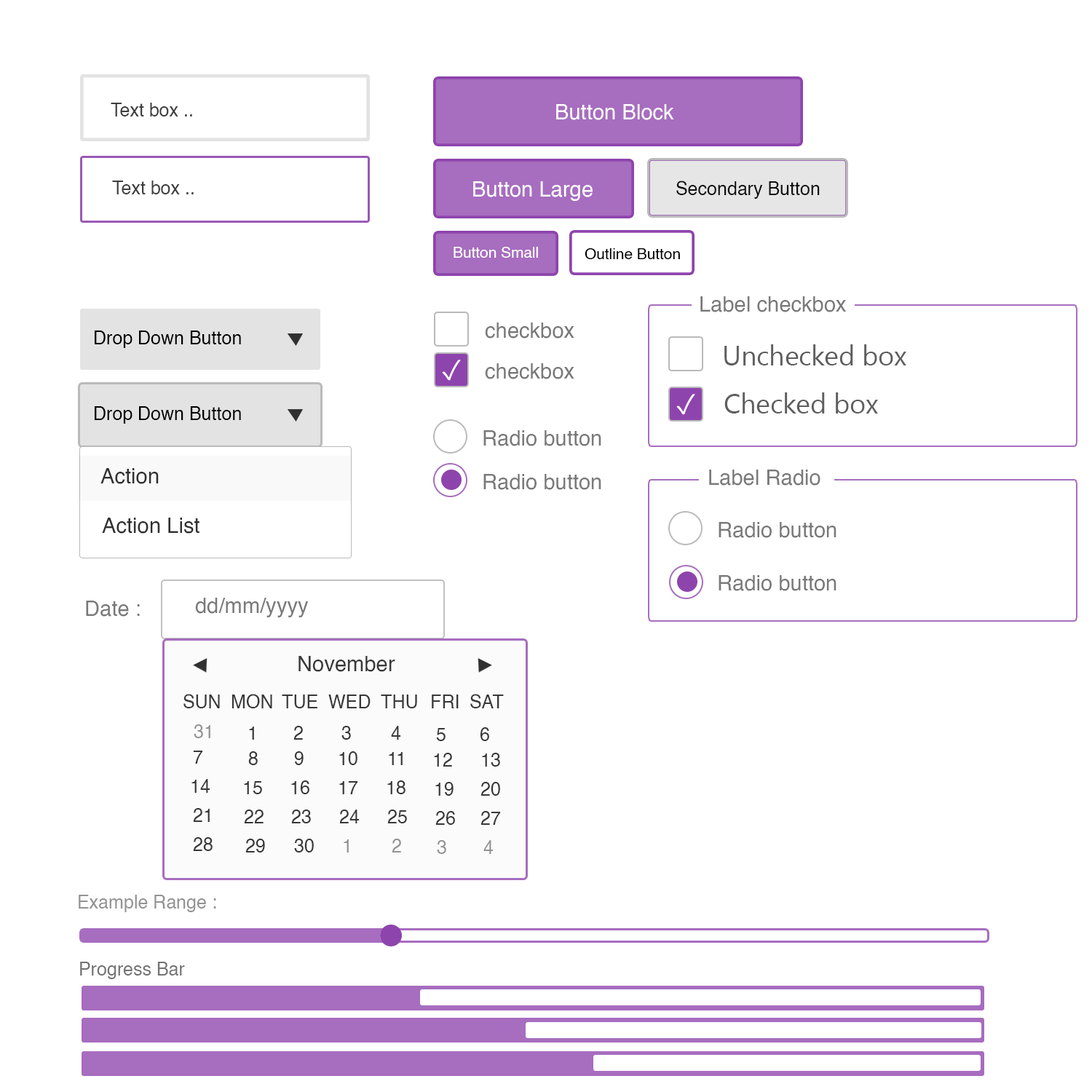
<style>
.page{position:relative;width:1092px;height:1092px;background:#ffffff}
.page>*{position:absolute;margin:0}
.t1{font:18.2px "Helvetica";color:#3f3f3f}
.t2{font:21.2px "Helvetica";color:#ffffff}
.t3{font:18.2px "Helvetica";color:#0f0f0f}
.t4{font:15.2px "Helvetica";color:#ffffff}
.t5{font:15.2px "Helvetica";color:#000000}
.t6{font:21.2px "Helvetica";color:#797979}
.t7{font:18.2px "Helvetica";color:#000000}
.t8{font:21.2px "Helvetica";color:#303030}
.t9{font:21.2px "Helvetica";color:#383838}
.t10{font:18.2px "Helvetica";color:#383838}
.t11{font:18.2px "Helvetica";color:#939393}
.t12{font:18.2px "Helvetica";color:#737373}
</style>
<div class="page">
<p class="t1" style="left:111px;top:103px;width:81px;height:13px">Text box ..</p>
<p class="t2" style="left:556px;top:104px;width:118px;height:16px">Button Block</p>
<p class="t1" style="left:112px;top:181px;width:82px;height:13px">Text box ..</p>
<p class="t2" style="left:473px;top:181px;width:120px;height:20px">Button Large</p>
<p class="t3" style="left:676px;top:181px;width:144px;height:18px">Secondary Button</p>
<p class="t4" style="left:454px;top:247px;width:84px;height:11px">Button Small</p>
<p class="t5" style="left:585px;top:248px;width:95px;height:11px">Outline Button</p>
<p class="t6" style="left:700px;top:296px;width:147px;height:16px">Label checkbox</p>
<p class="t6" style="left:485px;top:322px;width:89px;height:17px">checkbox</p>
<p class="t7" style="left:95px;top:331px;width:146px;height:17px">Drop Down Button</p>
<p class="t6" style="left:485px;top:363px;width:89px;height:16px">checkbox</p>
<p class="t7" style="left:95px;top:406px;width:146px;height:18px">Drop Down Button</p>
<p class="t6" style="left:483px;top:430px;width:118px;height:16px">Radio button</p>
<p class="t8" style="left:100px;top:468px;width:59px;height:16px">Action</p>
<p class="t6" style="left:483px;top:474px;width:118px;height:16px">Radio button</p>
<p class="t6" style="left:709px;top:470px;width:111px;height:16px">Label Radio</p>
<p class="t8" style="left:102px;top:518px;width:97px;height:16px">Action List</p>
<p class="t6" style="left:719px;top:522px;width:117px;height:16px">Radio button</p>
<p class="t6" style="left:719px;top:575px;width:117px;height:16px">Radio button</p>
<p class="t6" style="left:86px;top:601px;width:54px;height:16px">Date :</p>
<p class="t6" style="left:195px;top:598px;width:114px;height:19px">dd/mm/yyyy</p>
<p class="t9" style="left:298px;top:656px;width:97px;height:16px">November</p>
<p class="t10" style="left:183px;top:694px;width:37px;height:14px">SUN</p>
<p class="t10" style="left:232px;top:694px;width:40px;height:14px">MON</p>
<p class="t10" style="left:282px;top:695px;width:35px;height:13px">TUE</p>
<p class="t10" style="left:328px;top:695px;width:43px;height:13px">WED</p>
<p class="t10" style="left:381px;top:695px;width:36px;height:13px">THU</p>
<p class="t10" style="left:432px;top:695px;width:27px;height:13px">FRI</p>
<p class="t10" style="left:470px;top:694px;width:34px;height:14px">SAT</p>
<p class="t11" style="left:194px;top:724px;width:16px;height:14px">31</p>
<p class="t10" style="left:293px;top:726px;width:10px;height:14px">2</p>
<p class="t10" style="left:341px;top:726px;width:10px;height:14px">3</p>
<p class="t10" style="left:391px;top:726px;width:10px;height:14px">4</p>
<p class="t10" style="left:249px;top:727px;width:5px;height:13px">1</p>
<p class="t10" style="left:436px;top:728px;width:10px;height:13px">5</p>
<p class="t10" style="left:480px;top:727px;width:9px;height:14px">6</p>
<p class="t10" style="left:193px;top:751px;width:10px;height:13px">7</p>
<p class="t10" style="left:248px;top:751px;width:10px;height:14px">8</p>
<p class="t10" style="left:294px;top:751px;width:10px;height:14px">9</p>
<p class="t10" style="left:339px;top:751px;width:18px;height:14px">10</p>
<p class="t10" style="left:389px;top:752px;width:14px;height:13px">11</p>
<p class="t10" style="left:434px;top:753px;width:18px;height:14px">12</p>
<p class="t10" style="left:482px;top:753px;width:18px;height:14px">13</p>
<p class="t10" style="left:191px;top:779px;width:19px;height:14px">14</p>
<p class="t10" style="left:244px;top:781px;width:18px;height:13px">15</p>
<p class="t10" style="left:291px;top:780px;width:18px;height:14px">16</p>
<p class="t10" style="left:339px;top:781px;width:19px;height:13px">17</p>
<p class="t10" style="left:387px;top:780px;width:18px;height:14px">18</p>
<p class="t10" style="left:435px;top:782px;width:19px;height:14px">19</p>
<p class="t10" style="left:480px;top:782px;width:20px;height:14px">20</p>
<p class="t10" style="left:193px;top:808px;width:17px;height:14px">21</p>
<p class="t10" style="left:244px;top:810px;width:20px;height:13px">22</p>
<p class="t10" style="left:291px;top:810px;width:20px;height:13px">23</p>
<p class="t10" style="left:339px;top:810px;width:21px;height:13px">24</p>
<p class="t10" style="left:387px;top:810px;width:20px;height:13px">25</p>
<p class="t10" style="left:435px;top:811px;width:20px;height:14px">26</p>
<p class="t10" style="left:480px;top:811px;width:21px;height:14px">27</p>
<p class="t10" style="left:193px;top:837px;width:20px;height:14px">28</p>
<p class="t10" style="left:245px;top:839px;width:20px;height:13px">29</p>
<p class="t10" style="left:294px;top:839px;width:20px;height:13px">30</p>
<p class="t11" style="left:344px;top:839px;width:5px;height:13px">1</p>
<p class="t11" style="left:392px;top:839px;width:9px;height:13px">2</p>
<p class="t11" style="left:437px;top:840px;width:9px;height:14px">3</p>
<p class="t11" style="left:483px;top:840px;width:11px;height:14px">4</p>
<p class="t11" style="left:79px;top:895px;width:137px;height:17px">Example Range :</p>
<p class="t12" style="left:80px;top:962px;width:105px;height:17px">Progress Bar</p>
</div>
